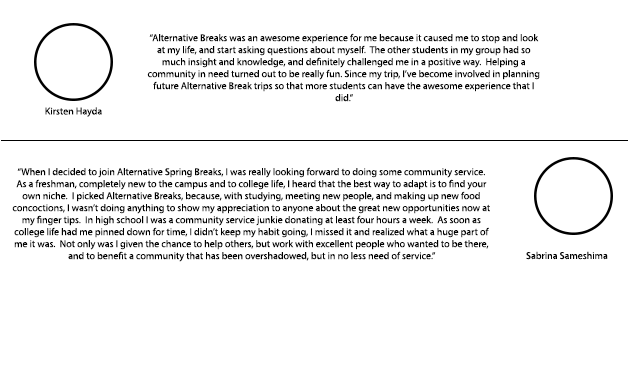
<style>
.page{position:relative;width:629px;height:379px;background:#ffffff}
.page>*{position:absolute;margin:0}
.t1{font:10px "MyriadPro-Regular";color:#000000}
</style>
<div class="page">
<p class="t1" style="left:147px;top:33px;width:393px;height:69px;text-align:center">“Alternative Breaks was an awesome experience for me because it caused me to stop and look at my life, and start asking questions about myself.  The other students in my group had so much insight and knowledge, and definitely challenged me in a positive way.  Helping a community in need turned out to be really fun. Since my trip, I’ve become involved in planning future Alternative Break trips so that more students can have the awesome experience that I did.”</p>
<p class="t1" style="left:45px;top:107px;width:57px;height:10px">Kirsten Hayda</p>
<p class="t1" style="left:12px;top:167px;width:478px;height:95px;text-align:center">“When I decided to join Alternative Spring Breaks, I was really looking forward to doing some community service.  As a freshman, completely new to the campus and to college life, I heard that the best way to adapt is to find your own niche.  I picked Alternative Breaks, because, with studying, meeting new people, and making up new food concoctions, I wasn’t doing anything to show my appreciation to anyone about the great new opportunities now at my finger tips.  In high school I was a community service junkie donating at least four hours a week.  As soon as college life had me pinned down for time, I didn’t keep my habit going, I missed it and realized what a huge part of me it was.  Not only was I given the chance to help others, but work with excellent people who wanted to be there, and to benefit a community that has been overshadowed, but in no less need of service.”</p>
<p class="t1" style="left:526px;top:251px;width:82px;height:9px">Sabrina Sameshima</p>
</div>
